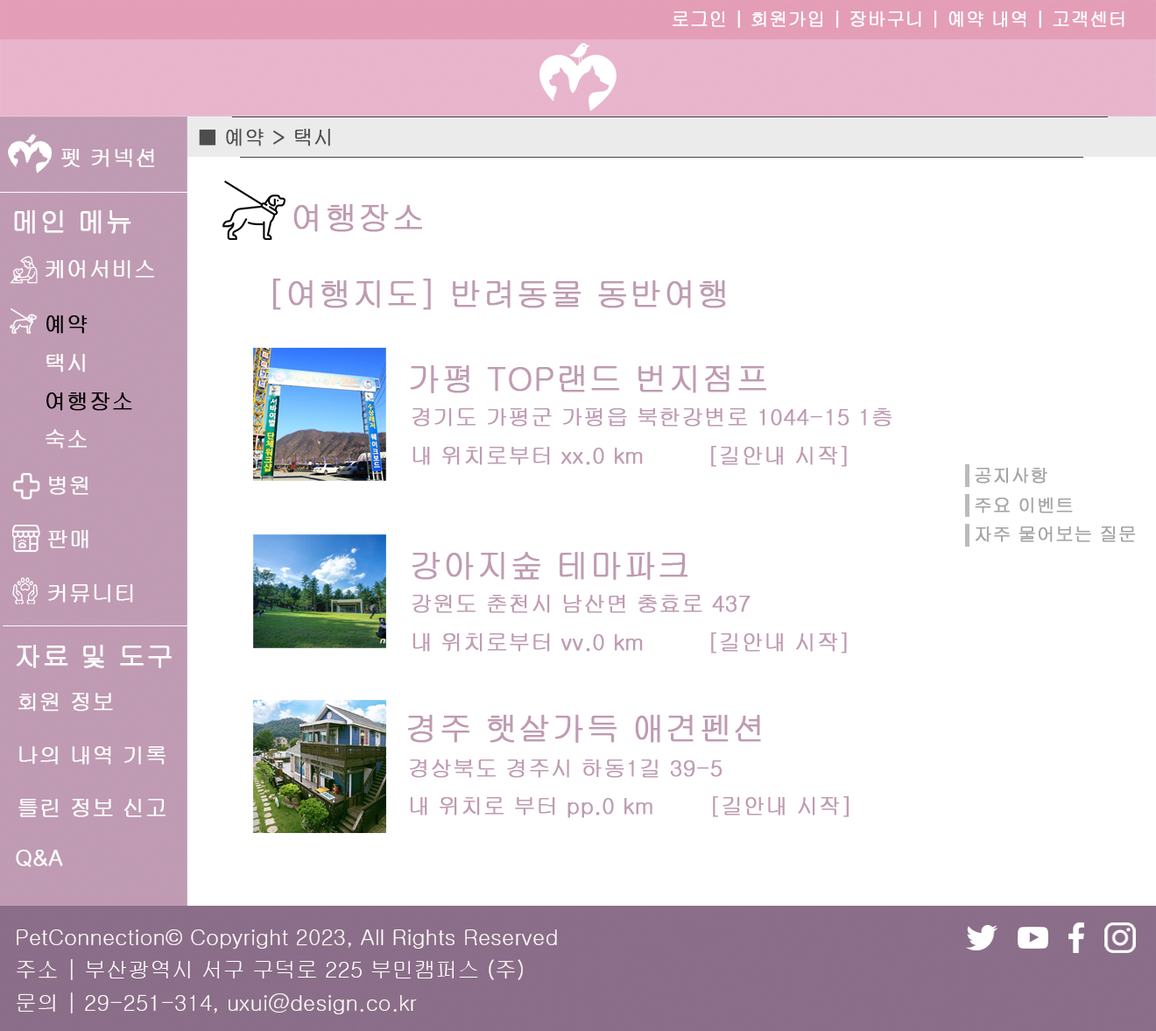
<style>
.page{position:relative;width:1156px;height:1031px;background:#ffffff}
.page>*{position:absolute;margin:0}
.t1{font:18.4px "Gulim";color:#ffffff;font-weight:bold}
.t2{font:20.1px "Gulim";color:#4d4d4d;font-weight:bold}
.t3{font:21.9px "Gulim";color:#ffffff;font-weight:bold}
.t4{font:32.9px "Gulim";color:#bf9bb2;font-weight:bold}
.t5{font:27.4px "Gulim";color:#ffffff;font-weight:bold}
.t6{font:21.9px "Gulim";color:#000000;font-weight:bold}
.t7{font:21.9px "Gulim";color:#bf9bb2;font-weight:bold}
.t8{font:18.3px "Gulim";color:#a5a5a5;font-weight:bold}
.t9{font:21.9px/32.9px "Gulim";color:#ffffff}
</style>
<div class="page">
<p class="t1" style="left:673px;top:11px;width:452px;height:17px">로그인 | 회원가입 | 장바구니 | 예약 내역 | 고객센터</p>
<p class="t2" style="left:199px;top:129px;width:131px;height:17px">■ 예약 &gt; 택시</p>
<p class="t3" style="left:61px;top:149px;width:93px;height:18px">펫 커넥션</p>
<p class="t4" style="left:293px;top:204px;width:129px;height:28px">여행장소</p>
<p class="t5" style="left:14px;top:210px;width:117px;height:24px">메인 메뉴</p>
<p class="t3" style="left:46px;top:260px;width:108px;height:19px">케어서비스</p>
<p class="t4" style="left:273px;top:279px;width:453px;height:31px">[여행지도] 반려동물 동반여행</p>
<p class="t6" style="left:46px;top:315px;width:86px;height:134px">예약<br><span class="t3">택시<br></span>여행장소<br><span class="t3">숙소</span></p>
<p class="t4" style="left:410px;top:365px;width:357px;height:28px">가평 TOP랜드 번지점프</p>
<p class="t7" style="left:413px;top:408px;width:479px;height:59px">경기도 가평군 가평읍 북한강변로 1044-15 1층<br>내 위치로부터 xx.0 km        [길안내 시작]</p>
<p class="t8" style="left:975px;top:468px;width:73px;height:16px">공지사항</p>
<p class="t3" style="left:49px;top:477px;width:39px;height:18px">병원</p>
<p class="t8" style="left:975px;top:498px;width:98px;height:15px">주요 이벤트</p>
<p class="t3" style="left:48px;top:530px;width:40px;height:18px">판매</p>
<p class="t8" style="left:976px;top:527px;width:160px;height:15px">자주 물어보는 질문</p>
<p class="t4" style="left:412px;top:552px;width:276px;height:28px">강아지숲 테마파크</p>
<p class="t3" style="left:48px;top:584px;width:85px;height:19px">커뮤니티</p>
<p class="t7" style="left:413px;top:595px;width:434px;height:59px">강원도 춘천시 남산면 충효로 437<br>내 위치로부터 vv.0 km        [길안내 시작]</p>
<p class="t5" style="left:17px;top:645px;width:155px;height:23px">자료 및 도구</p>
<p class="t3" style="left:18px;top:693px;width:95px;height:18px">회원 정보</p>
<p class="t4" style="left:407px;top:715px;width:354px;height:28px">경주 햇살가득 애견펜션</p>
<p class="t3" style="left:19px;top:746px;width:147px;height:19px">나의 내역 기록</p>
<p class="t7" style="left:410px;top:760px;width:440px;height:58px">경상북도 경주시 하동1길 39-5<br>내 위치로 부터 pp.0 km       [길안내 시작]</p>
<p class="t3" style="left:18px;top:799px;width:148px;height:18px">틀린 정보 신고</p>
<p class="t3" style="left:16px;top:850px;width:47px;height:17px">Q&amp;A</p>
<p class="t9" style="left:17px;top:930px;width:540px;height:84px">PetConnection© Copyright 2023, All Rights Reserved<br>주소 | 부산광역시 서구 구덕로 225 부민캠퍼스 (주)<br>문의 | 29-251-314, uxui@design.co.kr</p>
</div>
